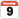
<style>
.page{position:relative;width:19px;height:19px;background:#ffffff}
.page>*{position:absolute;margin:0}
.t1{font:3px "Arial-BoldMT";color:#ffffff;font-weight:bold}
.t2{font:12px "Arial-BoldMT";color:#221e1f;font-weight:bold}
</style>
<div class="page">
<p class="t1" style="left:3px;top:2px;width:13px;height:3px">Tuesday</p>
<p class="t2" style="left:6px;top:6px;width:7px;height:10px">9</p>
</div>
